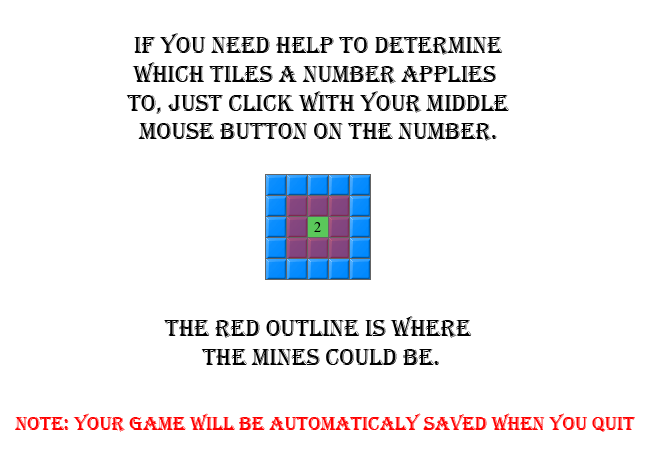
<style>
.page{position:relative;width:650px;height:450px;background:#ffffff}
.page>*{position:absolute;margin:0}
.t1{font:24px "Algerian";color:#000000}
.t2{font:20px "Algerian";color:#ff0000}
</style>
<div class="page">
<p class="t1" style="left:126px;top:33px;width:383px;height:108px;text-align:center">If you need help to determine<br>which tiles a number applies <br>to, just click with your middle<br>mouse button on the number.</p>
<p class="t1" style="left:164px;top:316px;width:308px;height:49px;text-align:center">the red outline is where <br>the mines could be.</p>
<p class="t2" style="left:15px;top:413px;width:620px;height:19px">note: your game will be automaticaly saved when you quit</p>
</div>
